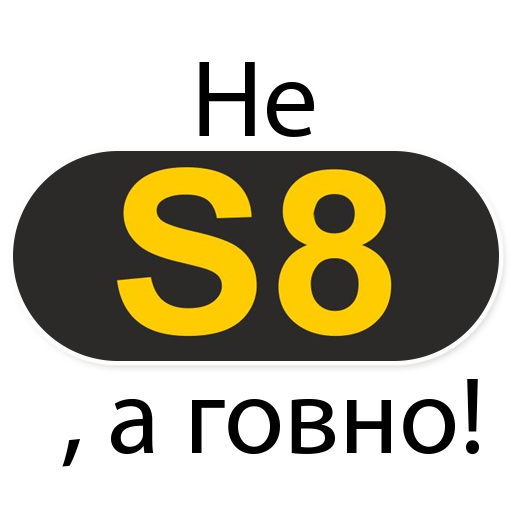
<style>
.page{position:relative;width:512px;height:512px;background:#ffffff}
.page>*{position:absolute;margin:0}
.t1{font:110px "MyriadPro-Regular";color:#000000}
</style>
<div class="page">
<p class="t1" style="left:199px;top:62px;width:115px;height:75px">Не</p>
<p class="t1" style="left:62px;top:379px;width:417px;height:88px">, а говно!</p>
</div>
